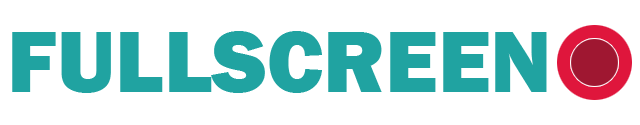
<style>
.page{position:relative;width:640px;height:125px;background:#ffffff}
.page>*{position:absolute;margin:0}
.t1{font:90px "FranklinGothic-Heavy";color:#20a3a1}
</style>
<div class="page">
<p class="t1" style="left:12px;top:31px;width:535px;height:62px">FULLSCREEN</p>
</div>
